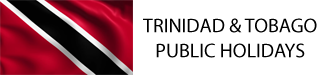
<style>
.page{position:relative;width:325px;height:75px;background:#ffffff}
.page>*{position:absolute;margin:0}
.t1{font:20px/25px "MyriadPro-Regular";color:#000000;text-transform:uppercase}
</style>
<div class="page">
<p class="t1" style="left:143px;top:18px;width:174px;height:40px;text-align:center">Trinidad &amp; Tobago<br>Public Holidays</p>
</div>
